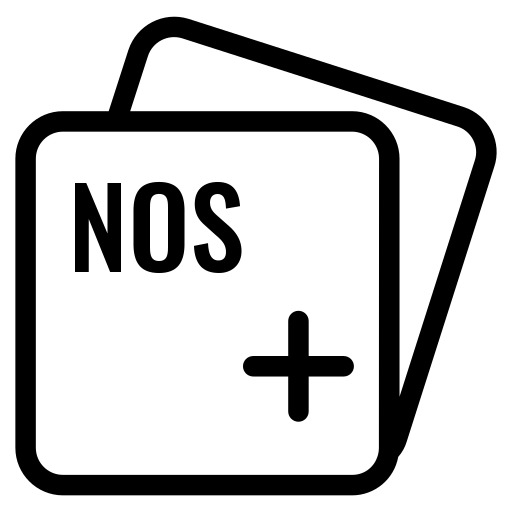
<style>
.page{position:relative;width:512px;height:512px;background:#ffffff}
.page>*{position:absolute;margin:0}
.t1{font:110px "Oswald-Medium";color:#000000}
</style>
<div class="page">
<p class="t1" style="left:75px;top:181px;width:167px;height:92px">NOS</p>
</div>
